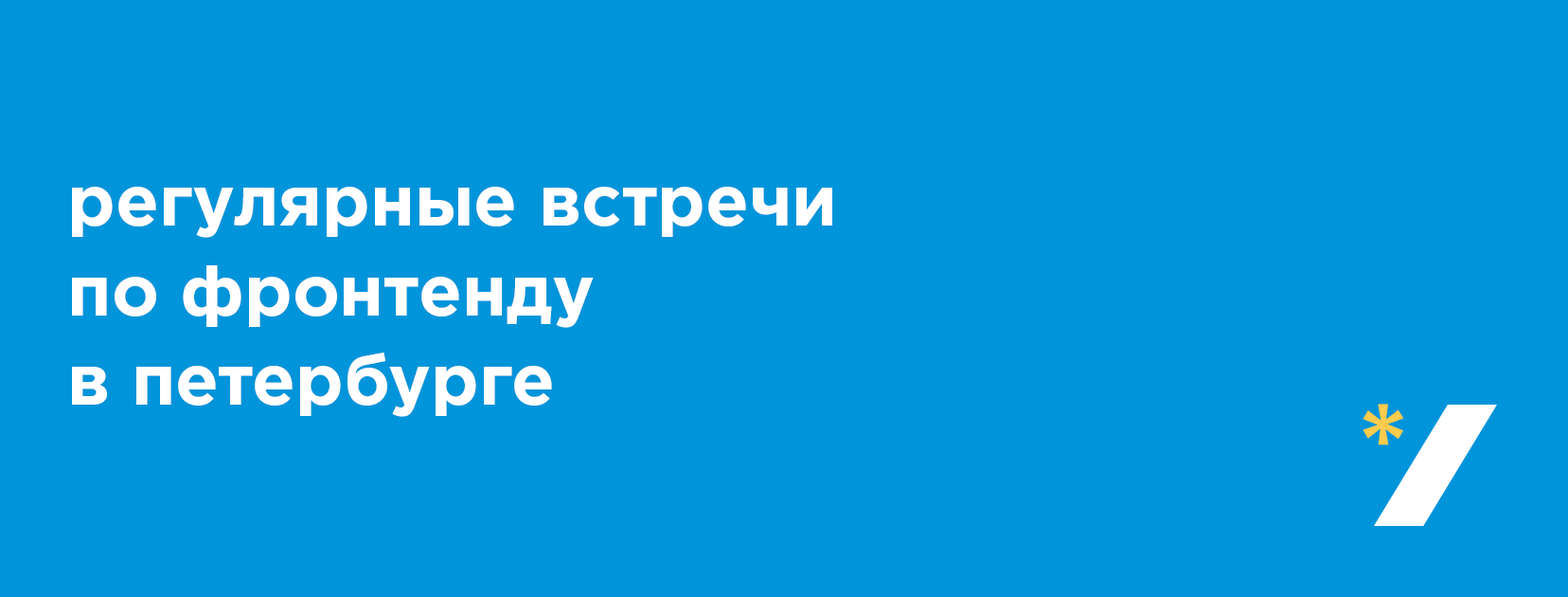
<style>
.page{position:relative;width:1568px;height:597px;background:#0094da}
.page>*{position:absolute;margin:0}
.t1{font:71px/89.5px "GothamPro-Bold";color:#ffffff}
</style>
<div class="page">
<p class="t1" style="left:72px;top:187px;width:760px;height:230px">регулярные встречи<br>по фронтенду<br>в петербурге</p>
</div>
